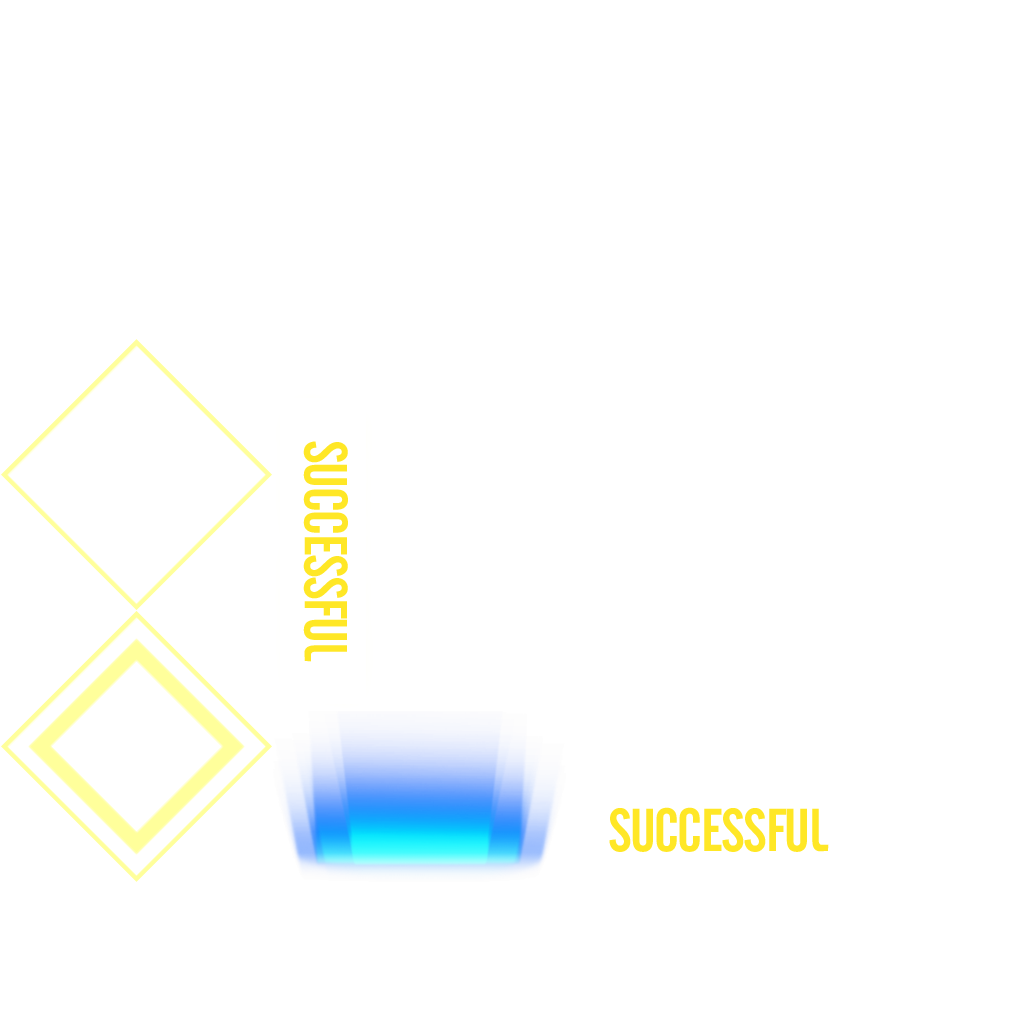
<style>
.page{position:relative;width:1024px;height:1024px;background:#ffffff}
.page>*{position:absolute;margin:0}
.t1{font:60px "UTM-Cafeta";letter-spacing:-0.025em;color:#ffe726;text-transform:uppercase}
</style>
<div class="page">
<p class="t1" style="left:303px;top:441px;width:45px;height:221px;rotate:90deg">successful</p>
<p class="t1" style="left:609px;top:807px;width:220px;height:45px">successful</p>
</div>
